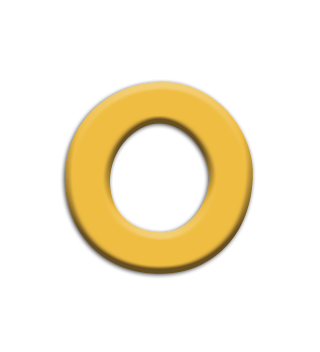
<style>
.page{position:relative;width:320px;height:352px;background:#ffffff}
.page>*{position:absolute;margin:0}
.t1{font:422px "FinkHeavy";color:#efbd42}
</style>
<div class="page">
<p class="t1" style="left:65px;top:82px;width:188px;height:192px">o</p>
</div>
